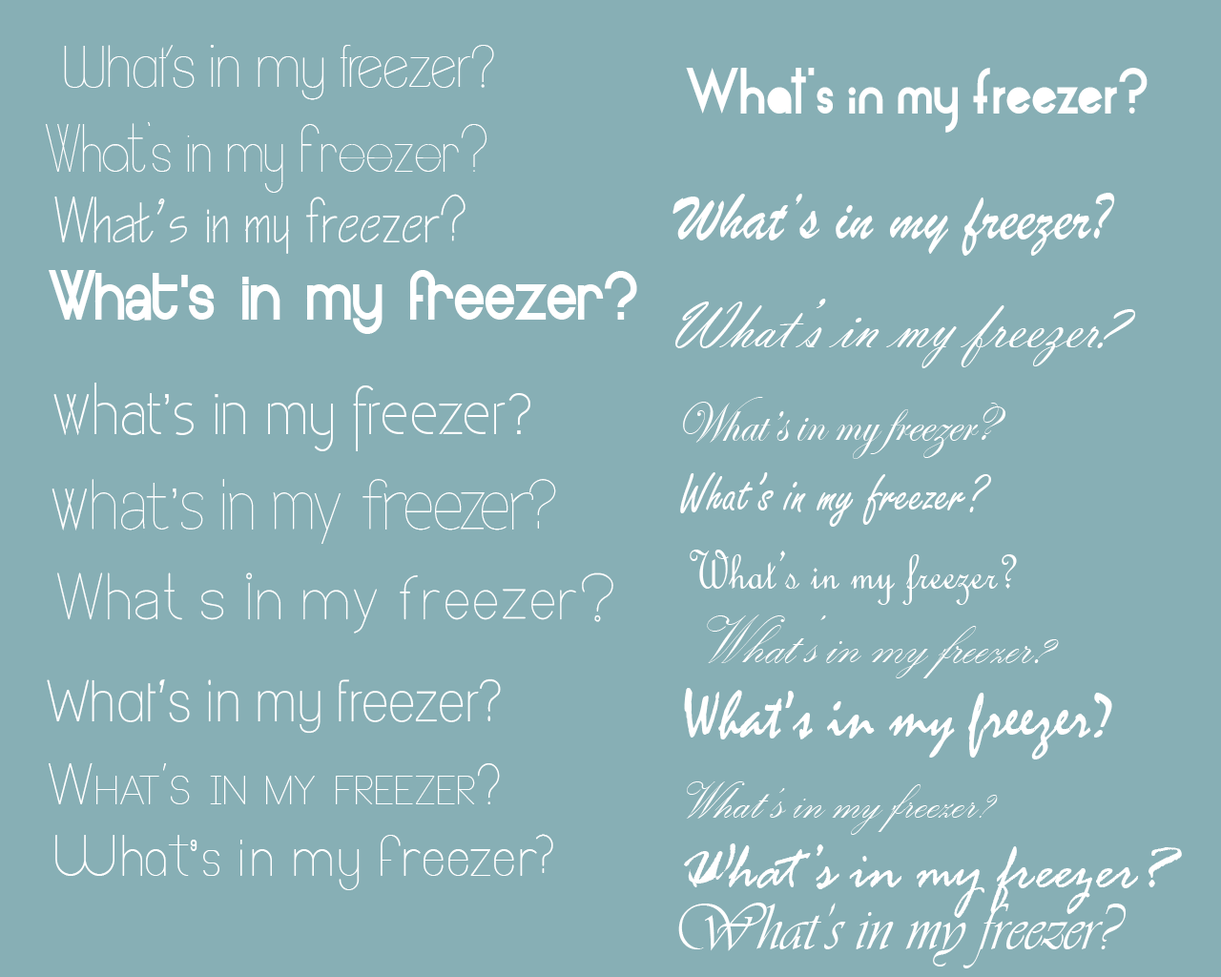
<style>
.page{position:relative;width:1221px;height:977px;background:#87afb5}
.page>*{position:absolute;margin:0}
.t1{font:57.2px "ClementePDaa-Hairline";color:#ffffff;scale:0.9 1}
.t2{font:57.2px "AlpacaSolidify";color:#ffffff;scale:0.9 1}
.t3{font:68.7px "Elegantlight";color:#ffffff;scale:0.9 1}
.t4{font:57.2px "Cityblueprint";color:#ffffff;scale:0.9 1}
.t5{font:68.7px "BrushScriptMT";color:#ffffff;scale:0.9 1}
.t6{font:57.2px "EuropeUnderground";color:#ffffff;scale:0.9 1}
.t7{font:68.7px "VladimirScript";color:#ffffff;scale:0.9 1}
.t8{font:57.2px "Existence-StencilLight";color:#ffffff;scale:0.9 1}
.t9{font:57.2px "EdwardianScriptITC";color:#ffffff;scale:0.9 1}
.t10{font:57.2px "FreestyleScript-Regular";color:#ffffff;scale:0.9 1}
.t11{font:57.2px "FlexDisplay-Thin";color:#ffffff;scale:0.9 1}
.t12{font:57.2px "Existence-Light";color:#ffffff;scale:0.9 1}
.t13{font:57.2px "FrenchScriptMT";color:#ffffff;scale:0.9 1}
.t14{font:68.7px "HighThinLIGHT";color:#ffffff;scale:0.9 1}
.t15{font:68.7px "KunstlerScript";color:#ffffff;scale:0.9 1}
.t16{font:57.2px "Lane-Narrow";color:#ffffff;scale:0.9 1}
.t17{font:68.7px "Mistral";color:#ffffff;scale:0.9 1}
.t18{font:57.2px "Neou-Thin";color:#ffffff;font-variant:small-caps;scale:0.9 1}
.t19{font:68.7px "PalaceScriptMT";color:#ffffff;scale:0.9 1}
.t20{font:57.2px "Thinfont-Thin";color:#ffffff;scale:0.9 1}
.t21{font:68.7px "RageItalic";color:#ffffff;scale:0.9 1}
.t22{font:68.7px "Vivaldii";color:#ffffff;scale:0.9 1}
</style>
<div class="page">
<p class="t1" style="left:64px;top:45px;width:430px;height:55px">What’s in my freezer?</p>
<p class="t2" style="left:686px;top:68px;width:461px;height:65px">What’s in my freezer?</p>
<p class="t3" style="left:45px;top:122px;width:442px;height:71px">What’s in my freezer?</p>
<p class="t4" style="left:54px;top:194px;width:411px;height:60px">What’s in my freezer?</p>
<p class="t5" style="left:672px;top:193px;width:443px;height:63px">What’s in my freezer?</p>
<p class="t6" style="left:49px;top:270px;width:588px;height:64px">What’s in my freezer?</p>
<p class="t7" style="left:675px;top:299px;width:460px;height:69px">What’s in my freezer?</p>
<p class="t8" style="left:53px;top:382px;width:477px;height:69px">What’s in my freezer?</p>
<p class="t9" style="left:683px;top:397px;width:322px;height:62px">What’s in my freezer?</p>
<p class="t10" style="left:680px;top:472px;width:311px;height:55px">What’s in my freezer?</p>
<p class="t11" style="left:52px;top:479px;width:504px;height:65px"><span class="t12">W</span>hat<span class="t12">’</span>s in my freezer?</p>
<p class="t13" style="left:690px;top:549px;width:327px;height:56px">What’s in my freezer?</p>
<p class="t14" style="left:57px;top:572px;width:556px;height:61px">What’s in my freezer?</p>
<p class="t15" style="left:707px;top:614px;width:352px;height:64px">What’s in my freezer?</p>
<p class="t16" style="left:47px;top:678px;width:454px;height:55px">What’s in my freezer?</p>
<p class="t17" style="left:684px;top:688px;width:428px;height:71px">What’s in my freezer?</p>
<p class="t18" style="left:49px;top:762px;width:451px;height:42px">What’s in my freezer?</p>
<p class="t19" style="left:686px;top:781px;width:312px;height:54px">What’s in my freezer?</p>
<p class="t20" style="left:55px;top:834px;width:498px;height:56px">What’s in my freezer?</p>
<p class="t21" style="left:684px;top:843px;width:498px;height:75px">What’s in my freezer?</p>
<p class="t22" style="left:678px;top:902px;width:447px;height:66px">What’s in my freezer?</p>
</div>
